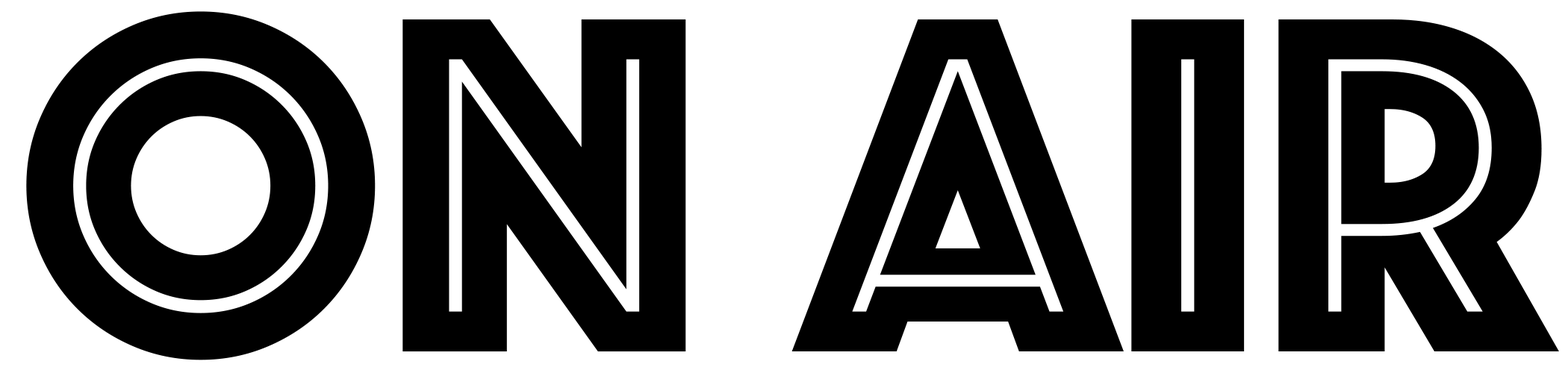
<style>
.page{position:relative;width:1568px;height:373px;background:#000000}
.page>*{position:absolute;margin:0}
.t1{font:497.8px "Phosphate-Inline";color:#000000}
</style>
<div class="page">
<p class="t1" style="left:26px;top:11px;width:1533px;height:350px">On AIR</p>
</div>
